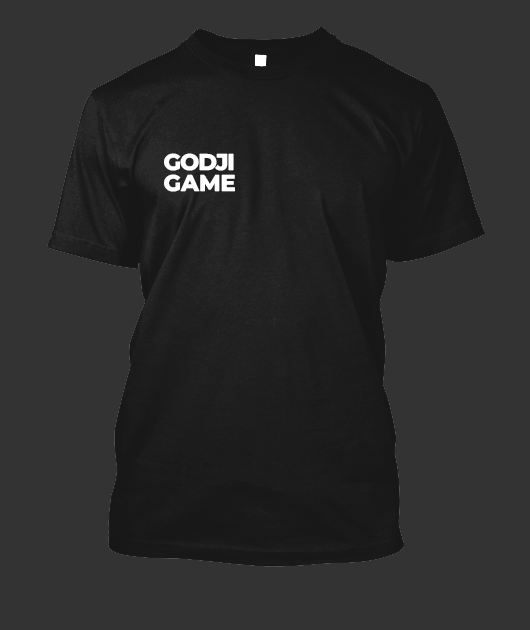
<style>
.page{position:relative;width:530px;height:630px;background:#333333}
.page>*{position:absolute;margin:0}
.t1{font:22.7px/21.2px "MontserratRoman-ExtraBold";letter-spacing:-0.045em;color:#ffffff}
.t2{font:22.7px/21.2px "MontserratRoman-ExtraBold";color:#ffffff}
</style>
<div class="page">
<p class="t1" style="left:164px;top:153px;width:71px;height:39px">GODJI<br><span class="t2">GAME</span></p>
</div>
